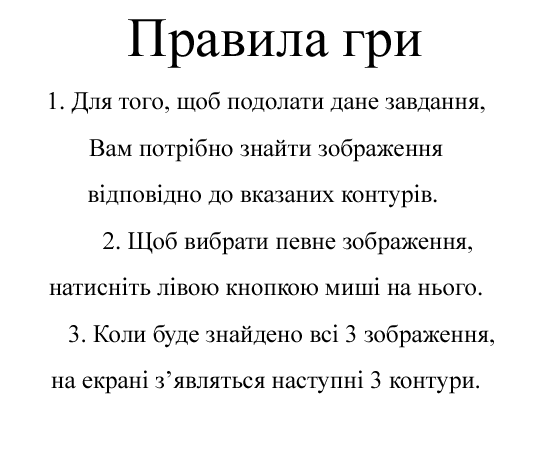
<style>
.page{position:relative;width:551px;height:472px;background:#ffffff}
.page>*{position:absolute;margin:0}
.t1{font:55.6px "TimesNewRomanPSMT";color:#000000}
.t2{font:25px/46.5px "TimesNewRomanPSMT";color:#000000}
</style>
<div class="page">
<p class="t1" style="left:128px;top:19px;width:294px;height:49px">Правила гри</p>
<p class="t2" style="left:49px;top:91px;width:445px;height:303px;text-align:center">1. Для того, щоб подолати дане завдання,<br>Вам потрібно знайти зображення<br>відповідно до вказаних контурів. <br>       2. Щоб вибрати певне зображення,<br>натисніть лівою кнопкою миші на нього.<br>     3. Коли буде знайдено всі 3 зображення,<br>на екрані з’являться наступні 3 контури.</p>
</div>
